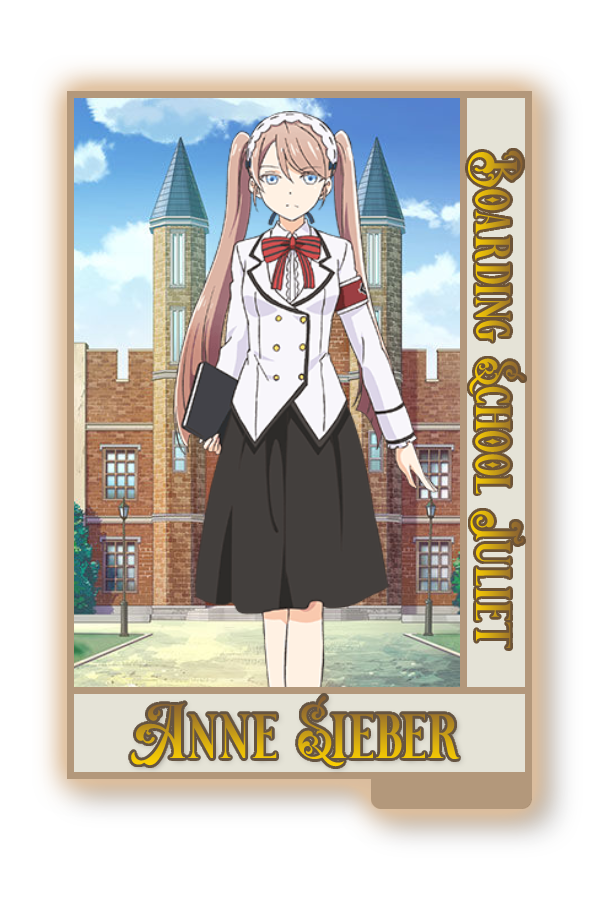
<style>
.page{position:relative;width:600px;height:900px;background:#ffffff}
.page>*{position:absolute;margin:0}
.t1{font:58.9px "VictorianDecadeDemoVersion"}
.t2{font:75px "VictorianDecadeDemoVersion"}
</style>
<div class="page">
<p class="t1" style="left:468px;top:150px;width:57px;height:498px;rotate:90deg">Boarding School Juliet</p>
<p class="t2" style="left:129px;top:695px;width:331px;height:72px">Anne Sieber</p>
</div>
